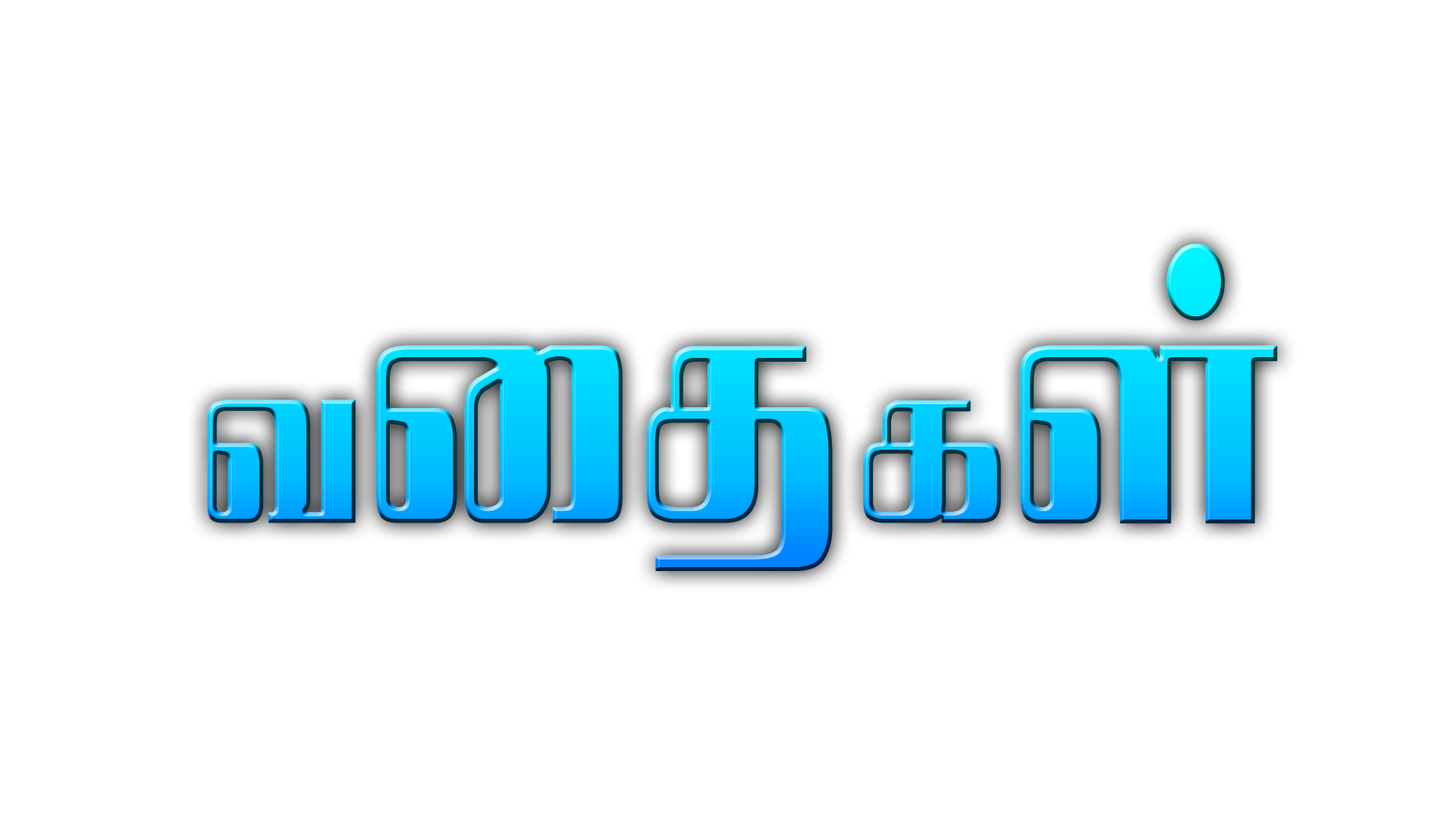
<style>
.page{position:relative;width:1456px;height:819px;background:#ffffff}
.page>*{position:absolute;margin:0}
.t1{font:463px "Bavani-Regular";font-weight:bold;scale:0.75 1}
.t2{font:320.5px "Bavani-Regular";font-weight:bold;scale:0.75 1}
</style>
<div class="page">
<p class="t1" style="left:207px;top:243px;width:1071px;height:328px"><span class="t2">t</span>ij<span class="t2">f</span>s;</p>
</div>
